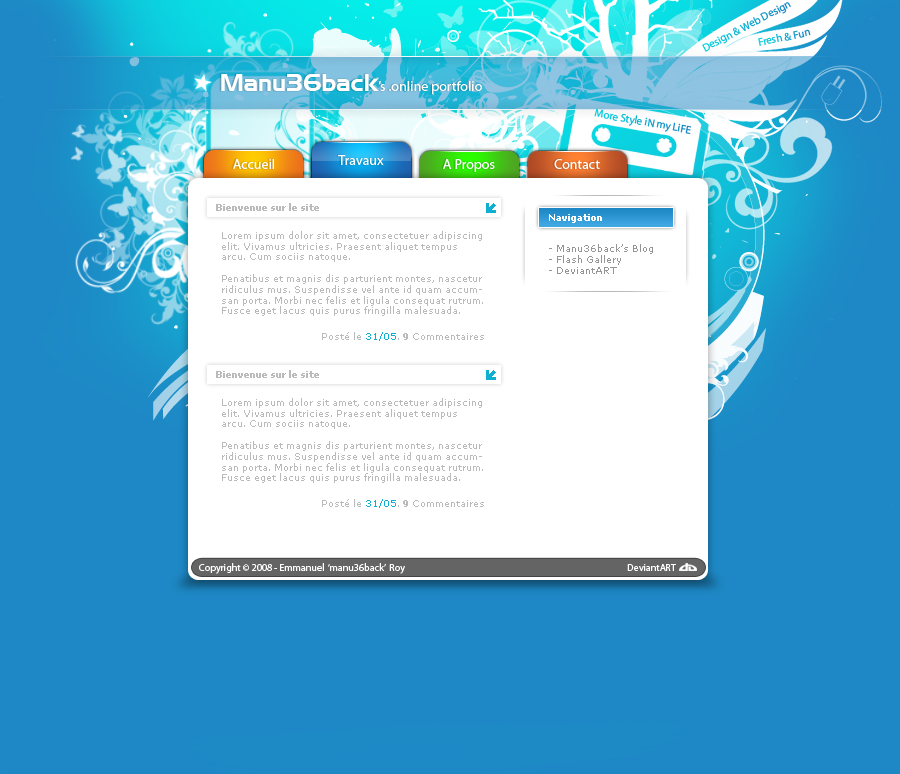
<style>
.page{position:relative;width:900px;height:774px;background:#1d88c5}
.page>*{position:absolute;margin:0}
.t1{font:11px "MyriadPro-Regular"}
.t2{font:14px "MyriadPro-Regular";color:#ffffff}
.t3{font:24px "Denmark";color:#ffffff}
.t4{font:9px "Verdana-Bold";color:#bababa}
.t5{font:9px "Verdana-Bold";color:#ffffff}
.t6{font:9px "Verdana";color:#bababa}
.t7{font:9px "Verdana";color:#959595}
.t8{font:9px "Verdana";color:#0fafcf}
.t9{font:10px "MyriadPro-Regular";color:#ffffff}
</style>
<div class="page">
<p class="t1" style="left:702px;top:2px;width:89px;height:50px;rotate:-28deg">Design &amp; Web Design</p>
<p class="t1" style="left:758px;top:29px;width:53px;height:17px;rotate:-12deg">Fresh &amp; Fun</p>
<p class="t2" style="left:221px;top:74px;width:261px;height:20px"><span class="t3">Manu36back</span>’s .online portfolio</p>
<p class="t1" style="left:594px;top:108px;width:98px;height:26px;rotate:10deg">More Style iN my LiFE</p>
<p class="t2" style="left:233px;top:159px;width:41px;height:10px">Accueil</p>
<p class="t2" style="left:338px;top:155px;width:46px;height:10px">Travaux</p>
<p class="t2" style="left:443px;top:159px;width:52px;height:13px">A Propos</p>
<p class="t2" style="left:554px;top:159px;width:46px;height:10px">Contact</p>
<p class="t4" style="left:216px;top:203px;width:103px;height:8px">Bienvenue sur le site</p>
<p class="t5" style="left:549px;top:214px;width:53px;height:9px">Navigation</p>
<p class="t6" style="left:222px;top:231px;width:261px;height:85px">Lorem ipsum dolor sit amet, consectetuer adipiscing elit. Vivamus ultricies. Praesent aliquet tempus arcu. Cum sociis natoque.<br><br>Penatibus et magnis dis parturient montes, nascetur ridiculus mus. Suspendisse vel ante id quam accumsan porta. Morbi nec felis et ligula consequat rutrum. Fusce eget lacus quis purus fringilla malesuada.</p>
<p class="t7" style="left:549px;top:244px;width:104px;height:30px">- Manu36back’s Blog<br>- Flash Gallery<br>- DeviantART</p>
<p class="t6" style="left:322px;top:332px;width:162px;height:9px">Posté le <span class="t8">31/05</span>. <span class="t4">9</span> Commentaires</p>
<p class="t4" style="left:216px;top:370px;width:103px;height:8px">Bienvenue sur le site</p>
<p class="t6" style="left:222px;top:398px;width:261px;height:85px">Lorem ipsum dolor sit amet, consectetuer adipiscing elit. Vivamus ultricies. Praesent aliquet tempus arcu. Cum sociis natoque.<br><br>Penatibus et magnis dis parturient montes, nascetur ridiculus mus. Suspendisse vel ante id quam accumsan porta. Morbi nec felis et ligula consequat rutrum. Fusce eget lacus quis purus fringilla malesuada.</p>
<p class="t6" style="left:322px;top:499px;width:162px;height:9px">Posté le <span class="t8">31/05</span>. <span class="t4">9</span> Commentaires</p>
<p class="t9" style="left:199px;top:563px;width:206px;height:11px">Copyright © 2008 - Emmanuel  ‘manu36back’  Roy</p>
<p class="t9" style="left:627px;top:564px;width:49px;height:7px">DeviantART</p>
</div>
